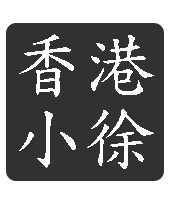
<style>
.page{position:relative;width:170px;height:200px;background:#313131}
.page>*{position:absolute;margin:0}
.t1{font:72px/72px "DFKaiShu-SB-Estd-BF";color:#ffffff}
.t2{font:24px "MicrosoftJhengHeiRegular";color:#ffffff}
</style>
<div class="page">
<p class="t1" style="left:19px;top:34px;width:135px;height:135px"><span class="t2">­</span>香港<br>小徐</p>
</div>
